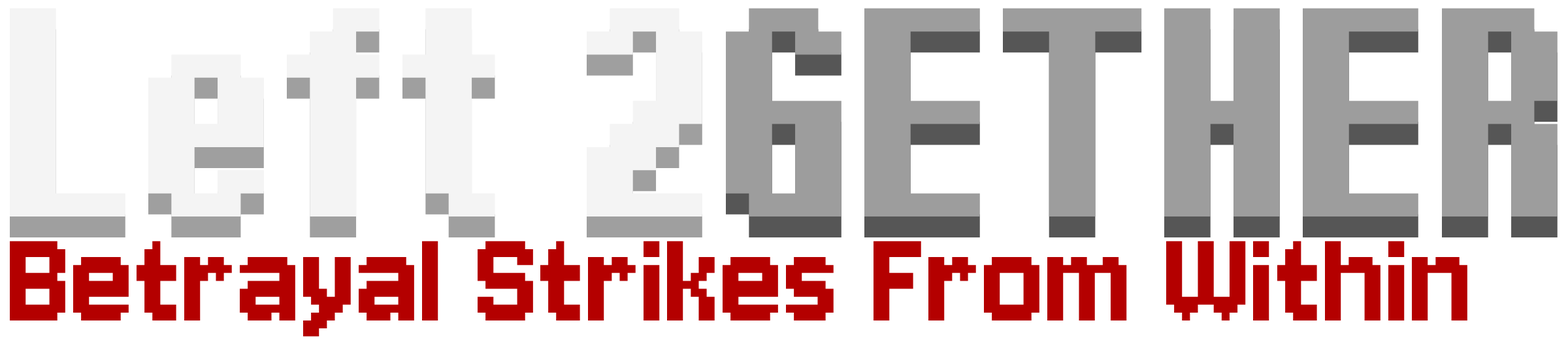
<style>
.page{position:relative;width:1568px;height:346px;background:#ffffff}
.page>*{position:absolute;margin:0}
.t1{font:369.6px "Ithaca";color:#f4f4f4}
.t2{font:369.6px "Ithaca";color:#9d9d9d}
.t3{font:369.6px "Ithaca";color:#9f9f9f}
.t4{font:369.6px "Ithaca";color:#565656}
.t5{font:147.8px "Jersey10-Regular";color:#b40000}
</style>
<div class="page">
<p class="t1" style="left:10px;top:8px;width:1548px;height:208px">Left 2<span class="t2">GETHER</span></p>
<p class="t3" style="left:10px;top:29px;width:1548px;height:208px">Left 2<span class="t4">GETHER</span></p>
<p class="t5" style="left:10px;top:240px;width:1457px;height:96px">Betrayal Strikes From Within</p>
</div>
